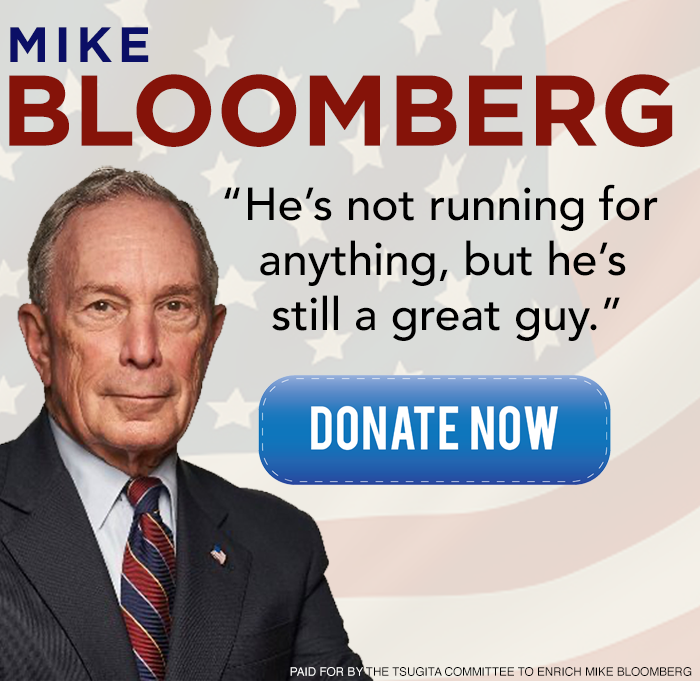
<style>
.page{position:relative;width:700px;height:681px}
.page>*{position:absolute;margin:0}
.t1{font:49.8px "Gotham-Bold";letter-spacing:0.1em;color:#0b0f66}
.t2{font:100px "Gotham-Bold";color:#851309}
.t3{font:45.8px "Avenir-Medium";color:#000000}
.t4{font:11.7px "Helvetica";color:#000000}
.t5{font:11.7px "Helvetica";color:#ffffff}
</style>
<div class="page">
<p class="t1" style="left:10px;top:27px;width:139px;height:35px">MIKE</p>
<p class="t2" style="left:9px;top:74px;width:664px;height:73px">BLOOMBERG</p>
<p class="t3" style="left:224px;top:184px;width:434px;height:157px">“He’s not running for  <br>   anything, but he’s <br>    still a great guy.”</p>
<p class="t4" style="left:290px;top:667px;width:402px;height:9px"><span class="t5">PAID FOR BY</span> THE TSUGITA COMMITTEE TO ENRICH MIKE BLOOMBERG</p>
</div>
